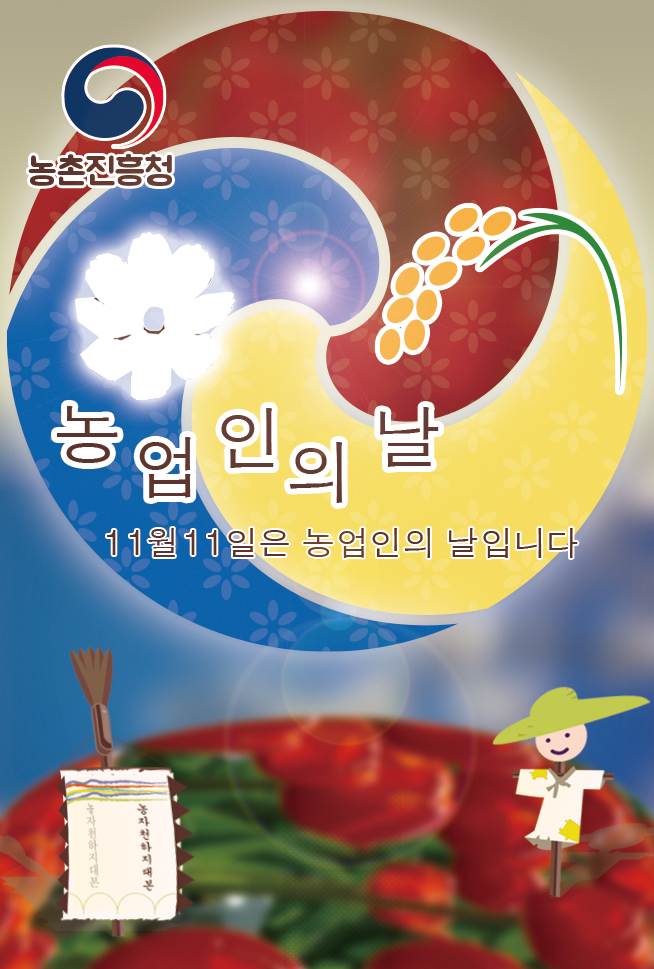
<style>
.page{position:relative;width:654px;height:969px}
.page>*{position:absolute;margin:0}
.t1{font:37.1px "BMJUAOTF";color:#5a322a}
.t2{font:68.5px "AppleGothic";color:#5a322a}
.t3{font:33.3px "AppleGothic";color:#5a322a}
</style>
<div class="page">
<p class="t1" style="left:28px;top:154px;width:144px;height:32px">농촌진흥청</p>
<p class="t2" style="left:57px;top:406px;width:61px;height:57px">농</p>
<p class="t2" style="left:221px;top:408px;width:53px;height:60px">인</p>
<p class="t2" style="left:380px;top:407px;width:59px;height:60px">날</p>
<p class="t2" style="left:139px;top:437px;width:52px;height:61px">업</p>
<p class="t2" style="left:290px;top:442px;width:53px;height:61px">의</p>
<p class="t3" style="left:107px;top:528px;width:471px;height:30px">11월11일은 농업인의 날입니다</p>
</div>
